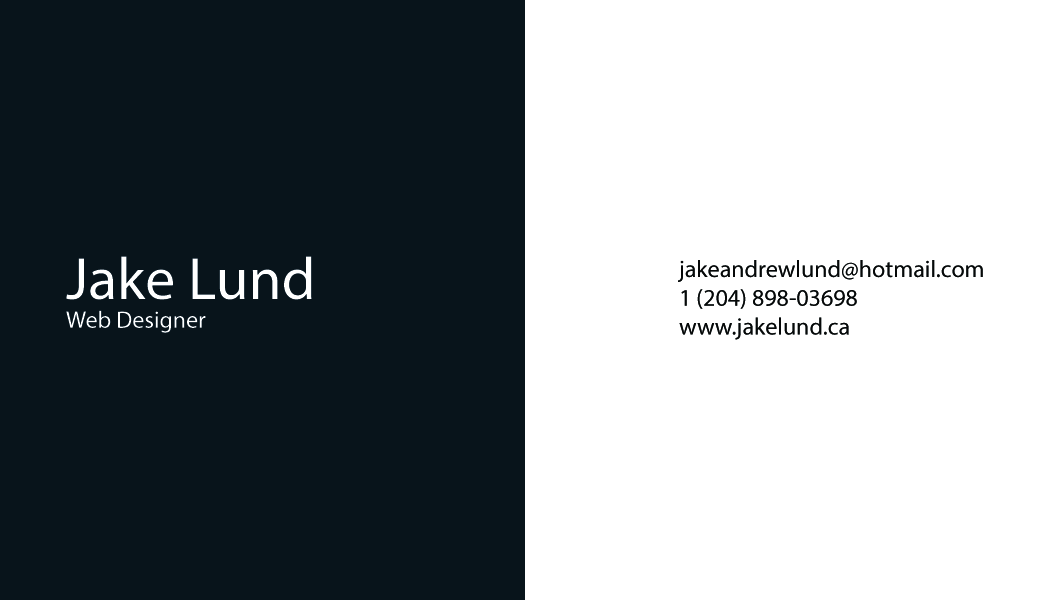
<style>
.page{position:relative;width:1050px;height:600px;background:#ffffff}
.page>*{position:absolute;margin:0}
.t1{font:24px "MyriadPro-Regular";color:#ffffff}
.t2{font:60px "MyriadPro-Regular";color:#ffffff}
.t3{font:24px "MyriadPro-Regular";color:#060808}
</style>
<div class="page">
<p class="t1" style="left:66px;top:256px;width:246px;height:77px"><span class="t2">Jake Lund<br></span>Web Designer</p>
<p class="t3" style="left:678px;top:260px;width:305px;height:80px">jakeandrewlund@hotmail.com<br>1 (204) 898-03698<br>www.jakelund.ca</p>
</div>
